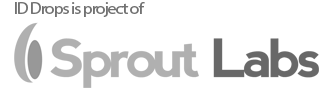
<style>
.page{position:relative;width:327px;height:88px;background:#ffffff}
.page>*{position:absolute;margin:0}
.t1{font:16.7px "MyriadPro-Regular";letter-spacing:-0.07em;color:#727272;scale:1.08 1}
</style>
<div class="page">
<p class="t1" style="left:15px;top:2px;width:130px;height:15px">ID Drops is project of</p>
</div>
